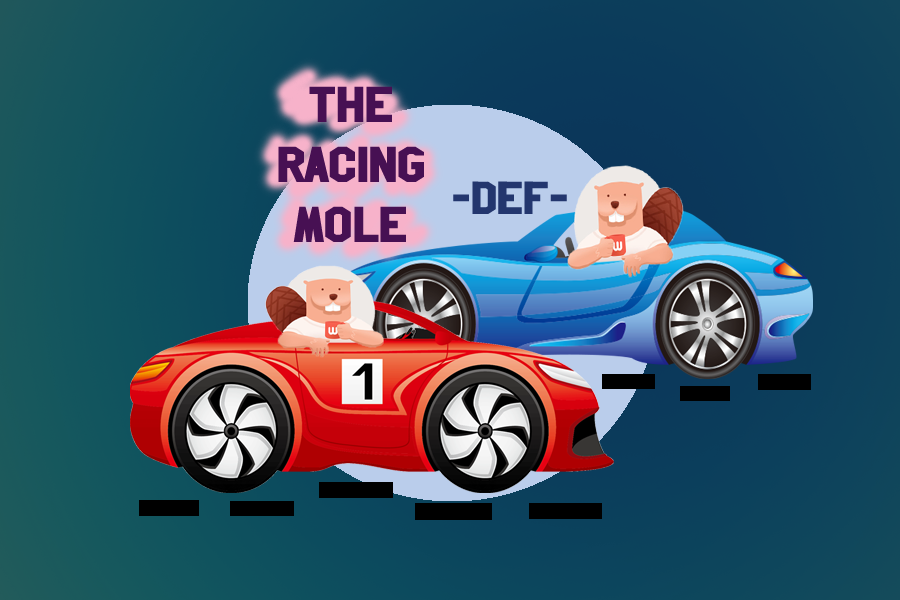
<style>
.page{position:relative;width:900px;height:600px}
.page>*{position:absolute;margin:0}
.t1{font:50px "HollywoodHills";color:#471053}
.t2{font:45.8px "HollywoodHills";color:#23366e}
</style>
<div class="page">
<p class="t1" style="left:278px;top:86px;width:146px;height:156px;text-align:center">The<br>racing<br>mole</p>
<p class="t2" style="left:453px;top:181px;width:114px;height:33px">-DEF-</p>
</div>
